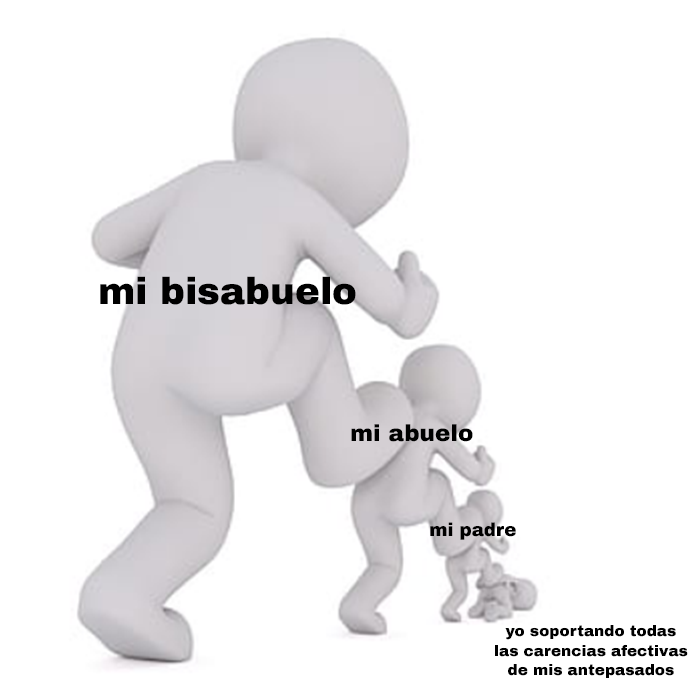
<style>
.page{position:relative;width:700px;height:700px;background:#ffffff}
.page>*{position:absolute;margin:0}
.t1{font:37.3px "ArchivoBlack-Regular";color:#000000}
.t2{font:23.1px "ArchivoBlack-Regular";color:#000000}
.t3{font:18.2px "ArchivoBlack-Regular";color:#000000}
.t4{font:15.2px "ArchivoBlack-Regular";color:#000000}
</style>
<div class="page">
<p class="t1" style="left:100px;top:276px;width:256px;height:29px">mi bisabuelo</p>
<p class="t2" style="left:351px;top:424px;width:122px;height:18px">mi abuelo</p>
<p class="t3" style="left:430px;top:522px;width:86px;height:18px">mi padre</p>
<p class="t4" style="left:495px;top:625px;width:193px;height:53px;text-align:center">yo soportando todas<br>las carencias afectivas<br>de mis antepasados</p>
</div>
